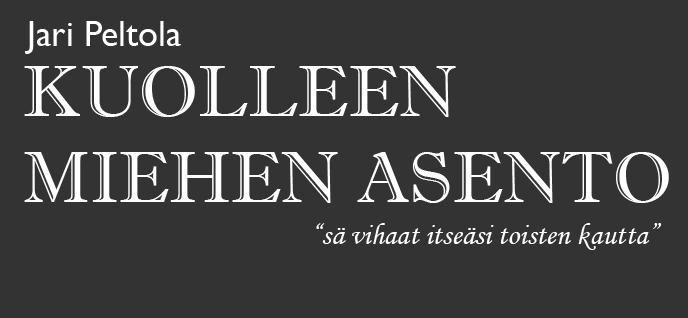
<style>
.page{position:relative;width:688px;height:318px;background:#333333}
.page>*{position:absolute;margin:0}
.t1{font:36px "GillSansMT";color:#ffffff}
.t2{font:72px "ImprintMT-Shadow";color:#ffffff}
.t3{font:30px "MonotypeCorsiva";color:#ffffff}
</style>
<div class="page">
<p class="t1" style="left:24px;top:21px;width:157px;height:33px">Jari Peltola</p>
<p class="t2" style="left:24px;top:66px;width:645px;height:137px">KUOLLEEN<br>MIEHEN ASENTO</p>
<p class="t3" style="left:316px;top:223px;width:346px;height:27px">“sä vihaat itseäsi toisten kautta”</p>
</div>
